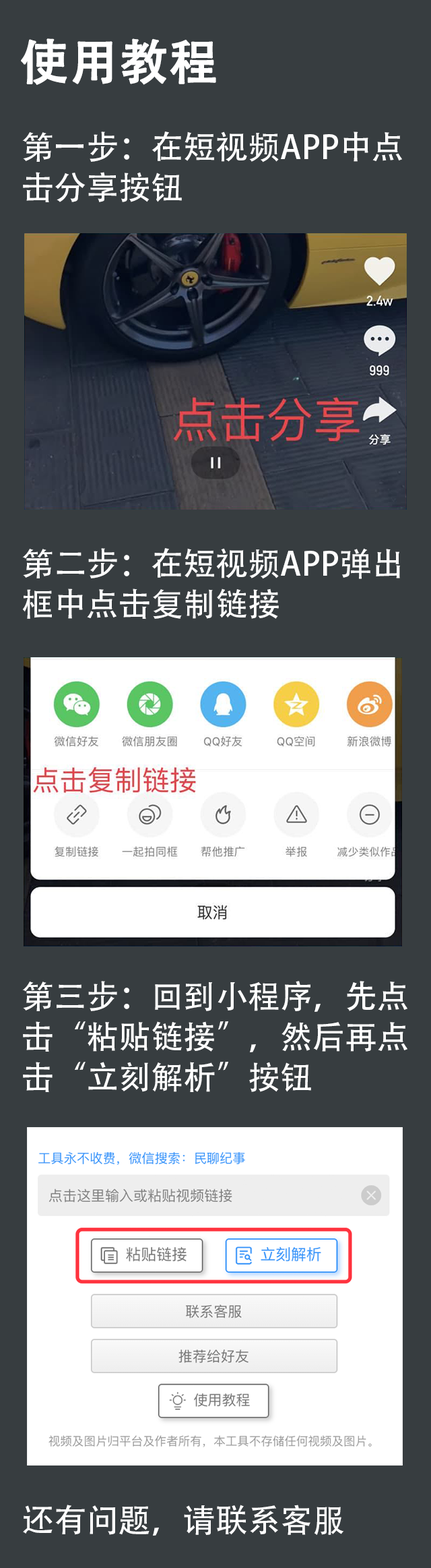
<style>
.page{position:relative;width:431px;height:1568px;background:#373d40}
.page>*{position:absolute;margin:0}
.t1{font:48.5px "AdobeHeitiStd-Regular";color:#ffffff;font-weight:bold}
.t2{font:32.4px/40.4px "AdobeHeitiStd-Regular";color:#ffffff}
.t3{font:32.4px "AdobeHeitiStd-Regular";color:#ffffff}
</style>
<div class="page">
<p class="t1" style="left:21px;top:38px;width:195px;height:47px">使用教程</p>
<p class="t2" style="left:22px;top:131px;width:380px;height:72px">第一步：在短视频APP中点<br>击分享按钮</p>
<p class="t2" style="left:22px;top:548px;width:378px;height:72px">第二步：在短视频APP弹出<br>框中点击复制链接</p>
<p class="t2" style="left:22px;top:981px;width:386px;height:112px">第三步：回到小程序，先点<br>击“粘贴链接”，然后再点<br>击“立刻解析”按钮</p>
<p class="t3" style="left:23px;top:1505px;width:321px;height:31px">还有问题，请联系客服</p>
</div>
